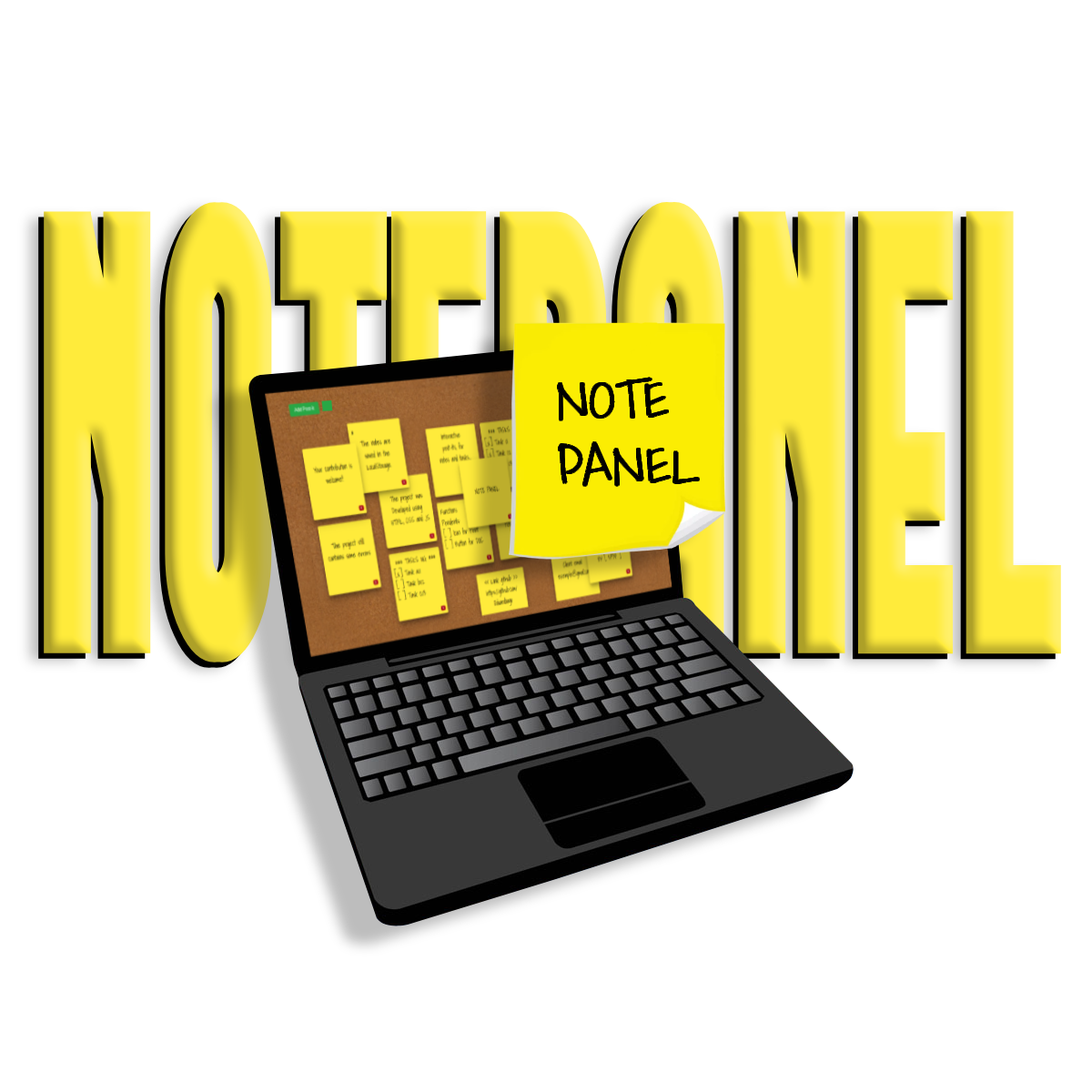
<style>
.page{position:relative;width:1092px;height:1092px;background:#ffffff}
.page>*{position:absolute;margin:0}
.t1{font:631.4px "FORQUE";font-weight:bold;scale:0.45 1}
.t2{font:54.6px "WaitingfortheSunrise";color:#010101;font-weight:bold}
</style>
<div class="page">
<p class="t1" style="left:38px;top:207px;width:1018px;height:461px">NOTEPANEL</p>
<p class="t1" style="left:44px;top:201px;width:1017px;height:461px">NOTEPANEL</p>
<p class="t2" style="left:557px;top:378px;width:142px;height:108px">NOTE<br>PANEL</p>
</div>
